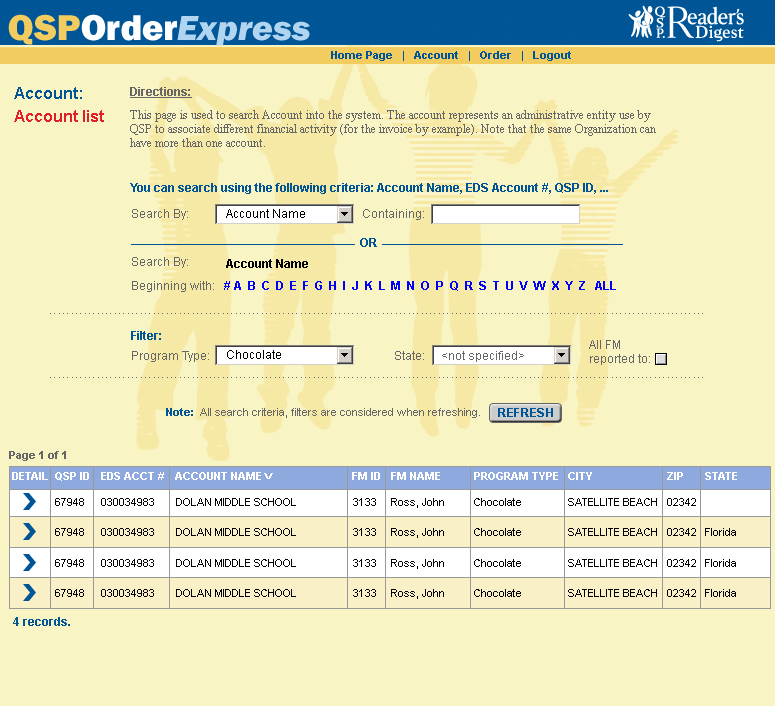
<style>
.page{position:relative;width:775px;height:706px;background:#f8f4c3}
.page>*{position:absolute;margin:0}
.t1{font:36px "FranklinGothic-HeavyItal";color:#b1d5f0}
.t2{font:36px "FranklinGothic-Heavy";color:#f3cc60}
.t3{font:36px "FranklinGothic-Heavy";color:#ffffff}
.t4{font:11px "Arial-BoldMT";color:#005596}
.t5{font:16px/23px "Arial-BoldMT";color:#e31e28}
.t6{font:16px/18px "Arial-BoldMT";color:#005596}
.t7{font:12px/14px "TimesNewRomanPSMT";color:#666666}
.t8{font:12px/9px "Arial-BoldMT";color:#666666;text-decoration:underline}
.t9{font:11px/12px "TimesNewRomanPSMT";color:#666666}
.t10{font:12px "Arial-BoldMT";color:#005596}
.t11{font:12px "ArialMT";color:#666666}
.t12{font:12px "ArialMT";color:#000000}
.t13{font:12px "Arial-BoldMT";color:#000000}
.t14{font:12px "Arial-BoldMT";color:#0000ff}
.t15{font:12px "ArialMT";letter-spacing:0.11em;color:#666666}
.t16{font:12px/14px "ArialMT";color:#666666}
.t17{font:11px "ArialMT";color:#666666}
.t18{font:12px "Arial-BoldMT";letter-spacing:0.06em;color:#005596}
.t19{font:11px "Arial-BoldMT";color:#666666}
.t20{font:11px "Arial-BoldMT";color:#ffffff}
.t21{font:8px "Arial-BoldMT";color:#ffffff;scale:1.5 1}
.t22{font:11px "ArialMT";color:#000000}
</style>
<div class="page">
<p class="t1" style="left:8px;top:14px;width:302px;height:32px"><span class="t2">QSP</span><span class="t3">Order</span>Express</p>
<p class="t4" style="left:331px;top:51px;width:240px;height:10px">Home Page   |   Account   |   Order   |   Logout</p>
<p class="t5" style="left:14px;top:87px;width:90px;height:35px"><span class="t6">Account:  <br></span>Account list</p>
<p class="t7" style="left:130px;top:87px;width:526px;height:60px"><span class="t8">Directions:<br><br></span>This page is used to search Account into the system. The account represents an administrative entity use by <br>QSP to associate different financial activity (for the invoice by example). Note that the same Organization can <br>have more than one account<span class="t9">.</span></p>
<p class="t10" style="left:130px;top:183px;width:478px;height:11px">You can search using the following criteria: Account Name, EDS Account #, QSP ID, ...</p>
<p class="t11" style="left:132px;top:209px;width:56px;height:11px">Search By:</p>
<p class="t12" style="left:226px;top:209px;width:79px;height:9px">Account Name</p>
<p class="t11" style="left:363px;top:209px;width:61px;height:11px">Containing:</p>
<p class="t10" style="left:360px;top:238px;width:17px;height:9px">OR</p>
<p class="t11" style="left:132px;top:257px;width:56px;height:11px">Search By:</p>
<p class="t13" style="left:226px;top:259px;width:82px;height:9px">Account Name</p>
<p class="t11" style="left:132px;top:281px;width:82px;height:11px">Beginning with:</p>
<p class="t14" style="left:224px;top:281px;width:392px;height:10px"># A  B  C  D  E  F  G  H  I  J  K  L  M  N  O  P  Q  R  S  T  U  V  W  X  Y  Z   ALL</p>
<p class="t15" style="left:50px;top:313px;width:653px;height:1px">........................................................................................................................................................</p>
<p class="t10" style="left:131px;top:331px;width:30px;height:9px">Filter:</p>
<p class="t16" style="left:589px;top:340px;width:61px;height:25px">All FM <br>reported to:</p>
<p class="t11" style="left:132px;top:351px;width:77px;height:11px">Program Type:</p>
<p class="t12" style="left:227px;top:350px;width:54px;height:9px">Chocolate</p>
<p class="t11" style="left:395px;top:351px;width:29px;height:9px">State:</p>
<p class="t11" style="left:442px;top:351px;width:82px;height:11px">&lt;not specified&gt;</p>
<p class="t15" style="left:50px;top:377px;width:653px;height:1px">........................................................................................................................................................</p>
<p class="t17" style="left:166px;top:408px;width:314px;height:10px"><span class="t4">Note:  </span>All search criteria, filters are considered when refreshing.</p>
<p class="t18" style="left:498px;top:408px;width:55px;height:9px">REFRESH</p>
<p class="t19" style="left:9px;top:451px;width:57px;height:10px">Page 1 of 1</p>
<p class="t20" style="left:12px;top:472px;width:36px;height:8px">DETAIL</p>
<p class="t20" style="left:55px;top:472px;width:34px;height:9px">QSP ID</p>
<p class="t20" style="left:101px;top:472px;width:63px;height:8px">EDS ACCT #</p>
<p class="t20" style="left:175px;top:472px;width:98px;height:8px">ACCOUNT NAME <span class="t21">V</span></p>
<p class="t20" style="left:352px;top:472px;width:28px;height:8px">FM ID</p>
<p class="t20" style="left:391px;top:472px;width:49px;height:8px">FM NAME</p>
<p class="t20" style="left:474px;top:472px;width:84px;height:8px">PROGRAM TYPE</p>
<p class="t20" style="left:568px;top:472px;width:24px;height:8px">CITY</p>
<p class="t20" style="left:667px;top:472px;width:16px;height:8px">ZIP</p>
<p class="t20" style="left:705px;top:472px;width:32px;height:8px">STATE</p>
<p class="t22" style="left:55px;top:498px;width:29px;height:8px">67948</p>
<p class="t22" style="left:101px;top:498px;width:53px;height:8px">030034983</p>
<p class="t22" style="left:176px;top:498px;width:120px;height:8px">DOLAN MIDDLE SCHOOL</p>
<p class="t22" style="left:353px;top:498px;width:23px;height:8px">3133</p>
<p class="t22" style="left:391px;top:498px;width:53px;height:10px">Ross, John</p>
<p class="t22" style="left:474px;top:498px;width:47px;height:8px">Chocolate</p>
<p class="t22" style="left:568px;top:498px;width:89px;height:8px">SATELLITE BEACH</p>
<p class="t22" style="left:667px;top:498px;width:29px;height:8px">02342</p>
<p class="t22" style="left:55px;top:528px;width:29px;height:8px">67948</p>
<p class="t22" style="left:101px;top:528px;width:53px;height:8px">030034983</p>
<p class="t22" style="left:176px;top:528px;width:120px;height:8px">DOLAN MIDDLE SCHOOL</p>
<p class="t22" style="left:353px;top:528px;width:23px;height:8px">3133</p>
<p class="t22" style="left:391px;top:528px;width:53px;height:10px">Ross, John</p>
<p class="t22" style="left:474px;top:528px;width:47px;height:8px">Chocolate</p>
<p class="t22" style="left:568px;top:528px;width:89px;height:8px">SATELLITE BEACH</p>
<p class="t22" style="left:667px;top:528px;width:29px;height:8px">02342</p>
<p class="t22" style="left:705px;top:528px;width:31px;height:8px">Florida</p>
<p class="t22" style="left:55px;top:559px;width:29px;height:8px">67948</p>
<p class="t22" style="left:101px;top:559px;width:53px;height:8px">030034983</p>
<p class="t22" style="left:176px;top:559px;width:120px;height:8px">DOLAN MIDDLE SCHOOL</p>
<p class="t22" style="left:353px;top:559px;width:23px;height:8px">3133</p>
<p class="t22" style="left:391px;top:559px;width:53px;height:10px">Ross, John</p>
<p class="t22" style="left:474px;top:559px;width:47px;height:8px">Chocolate</p>
<p class="t22" style="left:568px;top:559px;width:89px;height:8px">SATELLITE BEACH</p>
<p class="t22" style="left:667px;top:559px;width:29px;height:8px">02342</p>
<p class="t22" style="left:705px;top:559px;width:31px;height:8px">Florida</p>
<p class="t22" style="left:55px;top:589px;width:29px;height:8px">67948</p>
<p class="t22" style="left:101px;top:589px;width:53px;height:8px">030034983</p>
<p class="t22" style="left:176px;top:589px;width:120px;height:8px">DOLAN MIDDLE SCHOOL</p>
<p class="t22" style="left:353px;top:589px;width:23px;height:8px">3133</p>
<p class="t22" style="left:391px;top:589px;width:53px;height:10px">Ross, John</p>
<p class="t22" style="left:474px;top:589px;width:47px;height:8px">Chocolate</p>
<p class="t22" style="left:568px;top:589px;width:89px;height:8px">SATELLITE BEACH</p>
<p class="t22" style="left:667px;top:589px;width:29px;height:8px">02342</p>
<p class="t22" style="left:705px;top:589px;width:31px;height:8px">Florida</p>
<p class="t10" style="left:13px;top:617px;width:57px;height:9px">4 records.</p>
</div>
